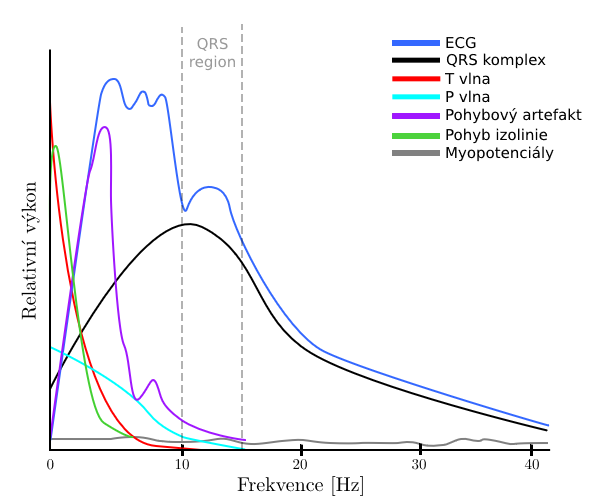
<style>
.page{position:relative;width:600px;height:500px;background:#ffffff}
.page>*{position:absolute;margin:0}
.t1{font:15px "DejaVuSans";color:#999999}
.t2{font:15px "DejaVuSans";color:#000000}
.t3{font:20px "LMRoman10-Regular";color:#000000}
.t4{font:15px "LMRoman10-Regular";color:#000000}
</style>
<div class="page">
<p class="t1" style="left:190px;top:37px;width:45px;height:34px;text-align:center">QRS<br>region</p>
<p class="t2" style="left:446px;top:36px;width:30px;height:13px">ECG</p>
<p class="t2" style="left:446px;top:53px;width:100px;height:16px">QRS komplex</p>
<p class="t2" style="left:444px;top:72px;width:46px;height:13px">T vlna</p>
<p class="t2" style="left:446px;top:90px;width:44px;height:13px">P vlna</p>
<p class="t2" style="left:446px;top:108px;width:136px;height:16px">Pohybový artefakt</p>
<p class="t2" style="left:446px;top:128px;width:102px;height:16px">Pohyb izolinie</p>
<p class="t2" style="left:446px;top:146px;width:108px;height:16px">Myopotenciály</p>
<p class="t3" style="left:21px;top:181px;width:19px;height:139px;rotate:-90deg">Relativní výkon</p>
<p class="t4" style="left:47px;top:458px;width:492px;height:12px">0       10        20    30     40</p>
<p class="t3" style="left:237px;top:476px;width:126px;height:20px">Frekvence [Hz]</p>
</div>
